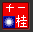
<style>
.page{position:relative;width:33px;height:32px;background:#f20000}
.page>*{position:absolute;margin:0}
.t1{font:10.4px "SimSun";color:#ffffff}
.t2{font:11.7px "SimSun";color:#ffffff}
</style>
<div class="page">
<p class="t1" style="left:6px;top:4px;width:19px;height:8px">十一</p>
<p class="t2" style="left:16px;top:15px;width:11px;height:12px">桂</p>
</div>
